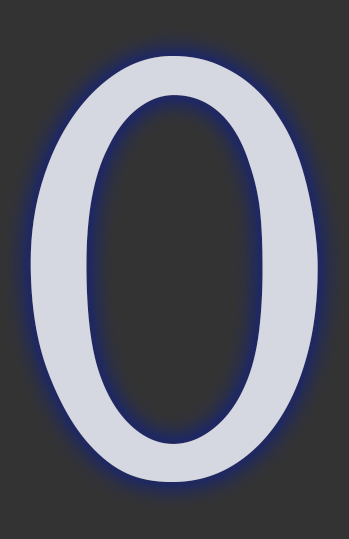
<style>
.page{position:relative;width:349px;height:539px;background:#333333}
.page>*{position:absolute;margin:0}
.t1{font:625px "MetaPlusLF-Regular";color:#d6d8e1}
</style>
<div class="page">
<p class="t1" style="left:30px;top:56px;width:288px;height:426px">0</p>
</div>
